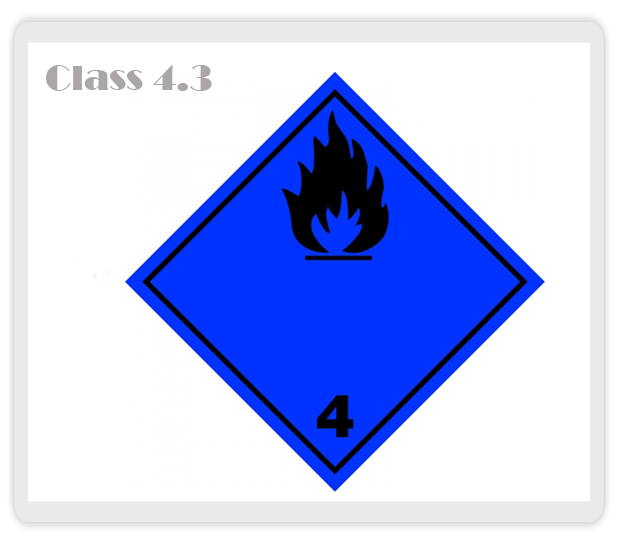
<style>
.page{position:relative;width:618px;height:544px;background:#ffffff}
.page>*{position:absolute;margin:0}
.t1{font:36px "Broadway";color:#aca7a7}
</style>
<div class="page">
<p class="t1" style="left:46px;top:64px;width:166px;height:27px">Class 4.3</p>
</div>
